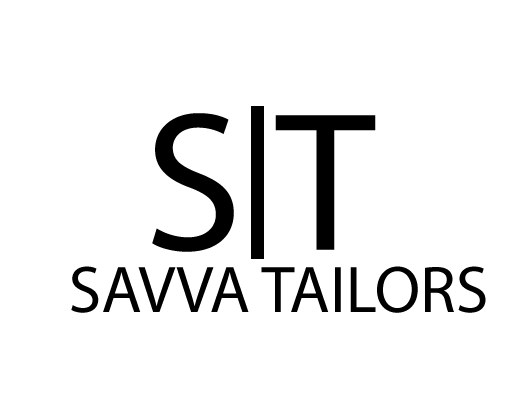
<style>
.page{position:relative;width:530px;height:398px;background:#ffffff}
.page>*{position:absolute;margin:0}
.t1{font:199px "MyriadPro-Regular";color:#000000}
.t2{font:66.3px "MyriadPro-Regular";color:#000000}
</style>
<div class="page">
<p class="t1" style="left:152px;top:113px;width:224px;height:139px">S T</p>
<p class="t2" style="left:71px;top:266px;width:415px;height:47px">SAVVA TAILORS</p>
</div>
